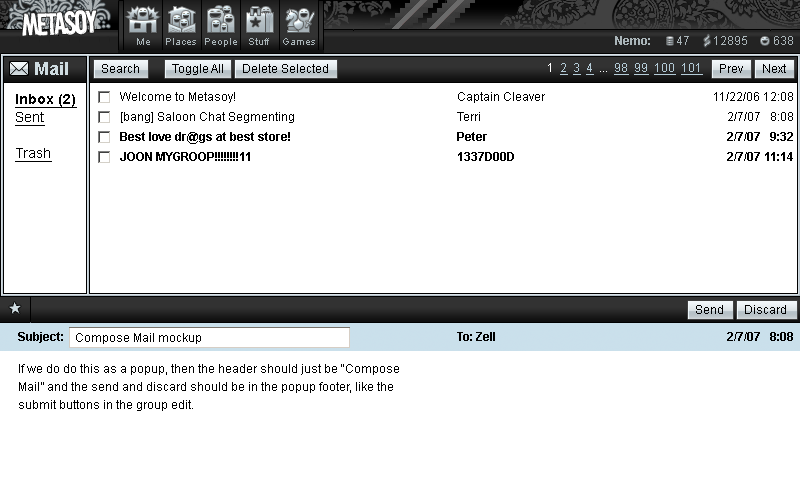
<style>
.page{position:relative;width:800px;height:501px;background:#ffffff}
.page>*{position:absolute;margin:0}
.t1{font:18px "Arial-BoldMT";color:#cfdce1}
.t2{font:12px "ArialMT";color:#000000}
.t3{font:12px "ArialMT";color:#b4cbd7;text-decoration:underline}
.t4{font:12px "ArialMT";color:#ffffff}
.t5{font:14px/18px "ArialMT";color:#000000;text-decoration:underline}
.t6{font:14px/18px "Arial-BoldMT";color:#000000;text-decoration:underline}
.t7{font:12px "Arial-BoldMT";color:#000000}
.t8{font:40px "KonQaBlack";letter-spacing:-0.05em;color:#cfdce1}
.t9{font:12px/18px "ArialMT";color:#000000}
</style>
<div class="page">
<p class="t1" style="left:35px;top:62px;width:33px;height:13px">Mail</p>
<p class="t2" style="left:102px;top:64px;width:37px;height:9px">Search</p>
<p class="t2" style="left:172px;top:64px;width:51px;height:11px">Toggle All</p>
<p class="t2" style="left:243px;top:64px;width:85px;height:9px">Delete Selected</p>
<p class="t3" style="left:548px;top:63px;width:155px;height:12px"><span class="t4">1  </span>2  3  4  <span class="t4">...  </span>98  99  100  101</p>
<p class="t2" style="left:720px;top:64px;width:23px;height:9px">Prev</p>
<p class="t2" style="left:763px;top:64px;width:23px;height:9px">Next</p>
<p class="t5" style="left:15px;top:94px;width:62px;height:68px"><span class="t6">Inbox (2)<br></span>Sent<br><br>Trash</p>
<p class="t2" style="left:120px;top:92px;width:115px;height:11px">Welcome to Metasoy!</p>
<p class="t2" style="left:458px;top:92px;width:87px;height:11px">Captain Cleaver</p>
<p class="t2" style="left:714px;top:92px;width:79px;height:9px">11/22/06 12:08</p>
<p class="t2" style="left:121px;top:112px;width:173px;height:11px">[bang] Saloon Chat Segmenting</p>
<p class="t2" style="left:457px;top:112px;width:23px;height:9px">Terri</p>
<p class="t2" style="left:728px;top:112px;width:65px;height:9px">2/7/07   8:08</p>
<p class="t7" style="left:120px;top:132px;width:170px;height:12px">Best love dr@gs at best store!</p>
<p class="t7" style="left:457px;top:132px;width:30px;height:9px">Peter</p>
<p class="t7" style="left:727px;top:132px;width:66px;height:9px">2/7/07   9:32</p>
<p class="t7" style="left:120px;top:152px;width:130px;height:9px">JOON MYGROOP!!!!!!!!11</p>
<p class="t7" style="left:458px;top:152px;width:56px;height:9px">1337D00D</p>
<p class="t7" style="left:727px;top:152px;width:66px;height:9px">2/7/07 11:14</p>
<p class="t8" style="left:9px;top:302px;width:12px;height:12px;rotate:-5deg">*</p>
<p class="t2" style="left:696px;top:305px;width:27px;height:9px">Send</p>
<p class="t2" style="left:745px;top:305px;width:41px;height:9px">Discard</p>
<p class="t7" style="left:18px;top:332px;width:45px;height:11px">Subject:</p>
<p class="t2" style="left:76px;top:333px;width:125px;height:11px">Compose Mail mockup</p>
<p class="t7" style="left:457px;top:332px;width:38px;height:9px">To: Zell</p>
<p class="t7" style="left:727px;top:332px;width:66px;height:9px">2/7/07   8:08</p>
<p class="t9" style="left:19px;top:364px;width:380px;height:47px">If we do do this as a popup, then the header should just be “Compose <br>Mail” and the send and discard should be in the popup footer, like the <br>submit buttons in the group edit.</p>
</div>
